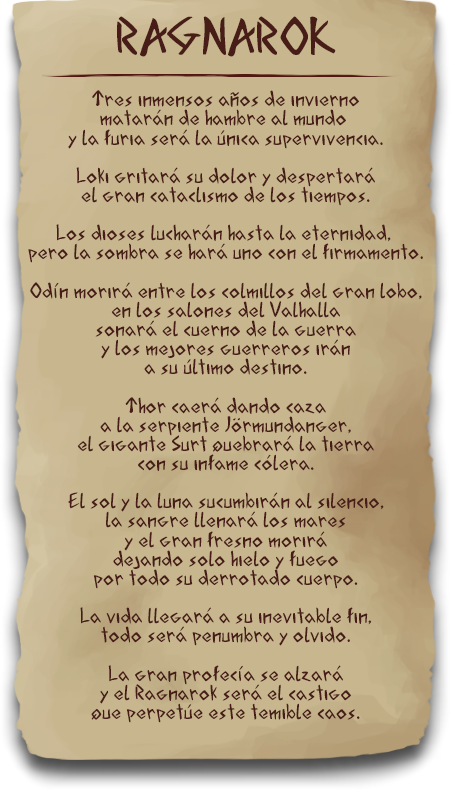
<style>
.page{position:relative;width:451px;height:790px;background:#c7b68e}
.page>*{position:absolute;margin:0}
.t1{font:48px "AcadianRunes-Regular";color:#481d18}
.t2{font:19.7px "AcadianRunes-Regular";color:#481d18}
</style>
<div class="page">
<p class="t1" style="left:117px;top:16px;width:219px;height:41px">RAGNAROK</p>
<p class="t2" style="left:28px;top:90px;width:395px;height:633px;text-align:center">Tres inmensos años de invierno<br>matarán de hambre al mundo <br>y la furia será la única supervivencia.<br><br>Loki gritará su dolor y despertará<br>el gran cataclismo de los tiempos.<br><br>Los dioses lucharán hasta la eternidad, <br>pero la sombra se hará uno con el firmamento.<br><br>Odín morirá entre los colmillos del gran lobo,<br>en los salones del Valhalla<br>sonará el cuerno de la guerra<br>y los mejores guerreros irán<br>a su último destino.<br><br>Thor caerá dando caza<br>a la serpiente Jörmundanger,<br>el gigante Surt quebrará la tierra<br>con su infame cólera.<br><br>El sol y la luna sucumbirán al silencio,<br>la sangre llenará los mares<br>y el gran fresno morirá<br>dejando solo hielo y fuego<br>por todo su derrotado cuerpo.<br><br>La vida llegará a su inevitable fin,<br>todo será penumbra y olvido.<br><br>La gran profecía se alzará<br>y el Ragnarok será el castigo<br>que perpetúe este temible caos.</p>
</div>
